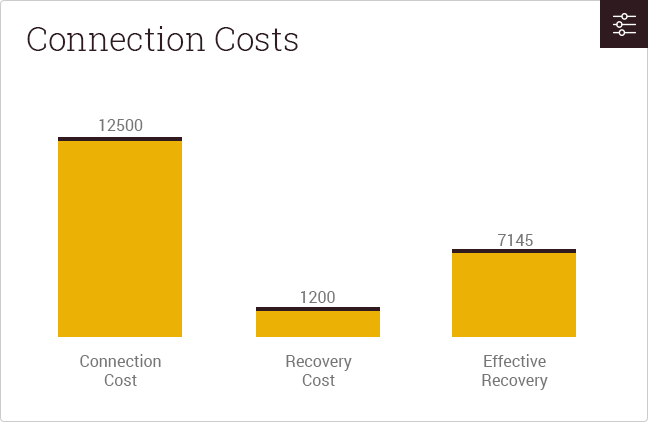
<style>
.page{position:relative;width:648px;height:422px;background:#ffffff}
.page>*{position:absolute;margin:0}
.t1{font:33px "RobotoSlab-Light";color:#2f1b1f}
.t2{font:16px "Roboto-Regular";color:#767676}
</style>
<div class="page">
<p class="t1" style="left:27px;top:26px;width:271px;height:25px">Connection Costs</p>
<p class="t2" style="left:99px;top:119px;width:44px;height:12px">12500</p>
<p class="t2" style="left:498px;top:234px;width:35px;height:12px">7145</p>
<p class="t2" style="left:300px;top:291px;width:35px;height:12px">1200</p>
<p class="t2" style="left:80px;top:354px;width:81px;height:32px;text-align:center">Connection<br>Cost</p>
<p class="t2" style="left:286px;top:355px;width:66px;height:31px;text-align:center">Recovery<br>Cost</p>
<p class="t2" style="left:482px;top:354px;width:66px;height:36px;text-align:center">Effective<br>Recovery</p>
</div>
